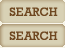
<style>
.page{position:relative;width:65px;height:48px;background:#d8d1b5}
.page>*{position:absolute;margin:0}
.t1{font:12px "Rockwell";letter-spacing:0.025em;color:#6f4821;text-transform:uppercase}
</style>
<div class="page">
<p class="t1" style="left:9px;top:7px;width:49px;height:9px">SEARCH</p>
<p class="t1" style="left:9px;top:31px;width:49px;height:9px">SEARCH</p>
</div>
